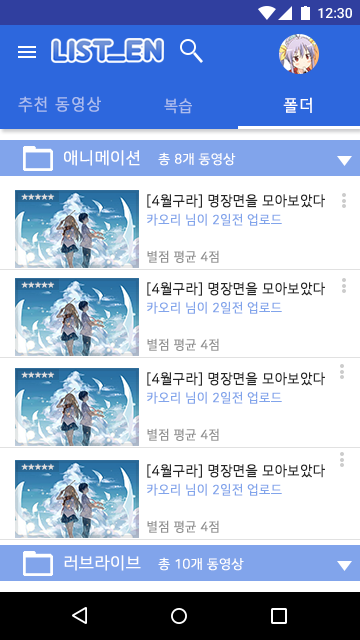
<style>
.page{position:relative;width:360px;height:640px;background:#ffffff}
.page>*{position:absolute;margin:0}
.t1{font:16px "MalgunGothicRegular";color:#acbdee;font-weight:bold;scale:0.96 1}
.t2{font:16px "NanumSquareR";letter-spacing:0.02em;color:#acbdee;font-weight:bold;scale:0.95 1}
.t3{font:16px "MalgunGothicRegular";color:#ffffff;font-weight:bold;scale:0.96 1}
.t4{font:16.5px "NanumSquareR";color:#ffffff;font-weight:bold}
.t5{font:13px "NanumSquareR";color:#ffffff;font-weight:bold}
.t6{font:6.6px "NanumSquareR";letter-spacing:0.1em;color:#dedede}
.t7{font:13.9px "NanumSquareR";letter-spacing:0.02em;color:#262626;font-weight:bold;scale:0.95 1}
.t8{font:12.9px/120px "NanumSquareR";letter-spacing:0.02em;color:#81a4eb;font-weight:bold;scale:0.95 1}
.t9{font:12.9px/120px "NanumSquareR";letter-spacing:0.02em;color:#909090;font-weight:bold;scale:0.95 1}
</style>
<div class="page">
<p class="t1" style="left:18px;top:96px;width:83px;height:17px">추천 동영상</p>
<p class="t2" style="left:164px;top:98px;width:28px;height:16px">복습</p>
<p class="t3" style="left:283px;top:97px;width:29px;height:16px">폴더</p>
<p class="t4" style="left:64px;top:150px;width:76px;height:16px">애니메이션</p>
<p class="t5" style="left:158px;top:152px;width:78px;height:14px">총 8개 동영상</p>
<p class="t6" style="left:21px;top:193px;width:34px;height:7px">★★★★★</p>
<p class="t7" style="left:147px;top:194px;width:178px;height:14px">[4월구라] 명장면을 모아보았다</p>
<p class="t8" style="left:147px;top:213px;width:135px;height:13px">카오리 님이 2일전 업로드<br><span class="t9">2</span></p>
<p class="t9" style="left:147px;top:250px;width:72px;height:13px">별점 평균 4점<br>2</p>
<p class="t6" style="left:21px;top:281px;width:34px;height:7px">★★★★★</p>
<p class="t7" style="left:147px;top:282px;width:178px;height:14px">[4월구라] 명장면을 모아보았다</p>
<p class="t8" style="left:147px;top:301px;width:135px;height:13px">카오리 님이 2일전 업로드<br><span class="t9">2</span></p>
<p class="t9" style="left:147px;top:338px;width:72px;height:13px">별점 평균 4점<br>2</p>
<p class="t6" style="left:21px;top:371px;width:34px;height:7px">★★★★★</p>
<p class="t7" style="left:147px;top:372px;width:178px;height:14px">[4월구라] 명장면을 모아보았다</p>
<p class="t8" style="left:147px;top:391px;width:135px;height:13px">카오리 님이 2일전 업로드<br><span class="t9">2</span></p>
<p class="t9" style="left:147px;top:428px;width:72px;height:13px">별점 평균 4점<br>2</p>
<p class="t6" style="left:21px;top:463px;width:34px;height:7px">★★★★★</p>
<p class="t7" style="left:147px;top:464px;width:178px;height:14px">[4월구라] 명장면을 모아보았다</p>
<p class="t8" style="left:147px;top:483px;width:135px;height:13px">카오리 님이 2일전 업로드<br><span class="t9">2</span></p>
<p class="t9" style="left:147px;top:520px;width:72px;height:13px">별점 평균 4점<br>2</p>
<p class="t4" style="left:64px;top:555px;width:77px;height:16px">러브라이브</p>
<p class="t5" style="left:158px;top:557px;width:86px;height:14px">총 10개 동영상</p>
</div>
